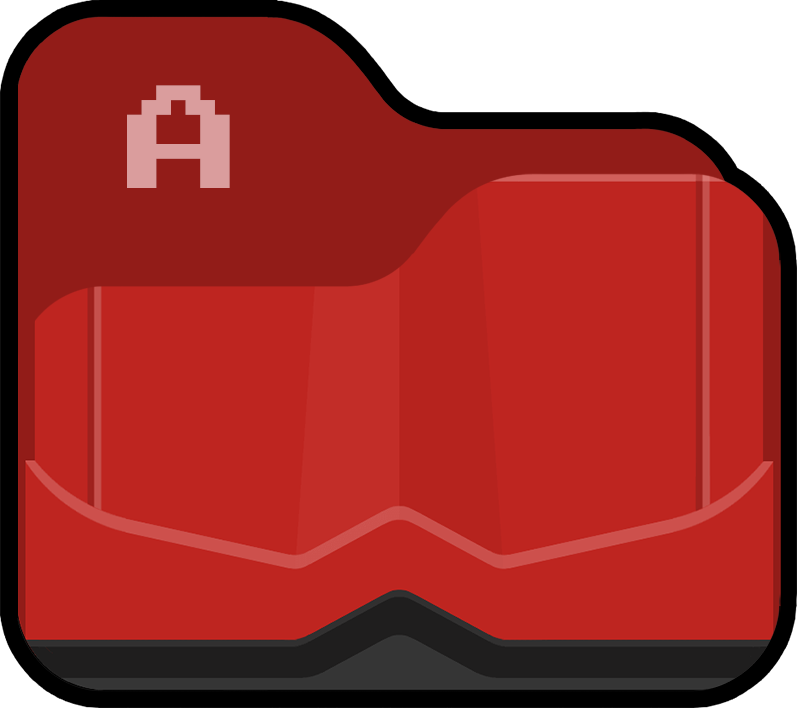
<style>
.page{position:relative;width:797px;height:708px;background:#be2520}
.page>*{position:absolute;margin:0}
.t1{font:150px "PixelEmulator";color:#da9d9d}
</style>
<div class="page">
<p class="t1" style="left:127px;top:85px;width:103px;height:103px">A</p>
</div>
